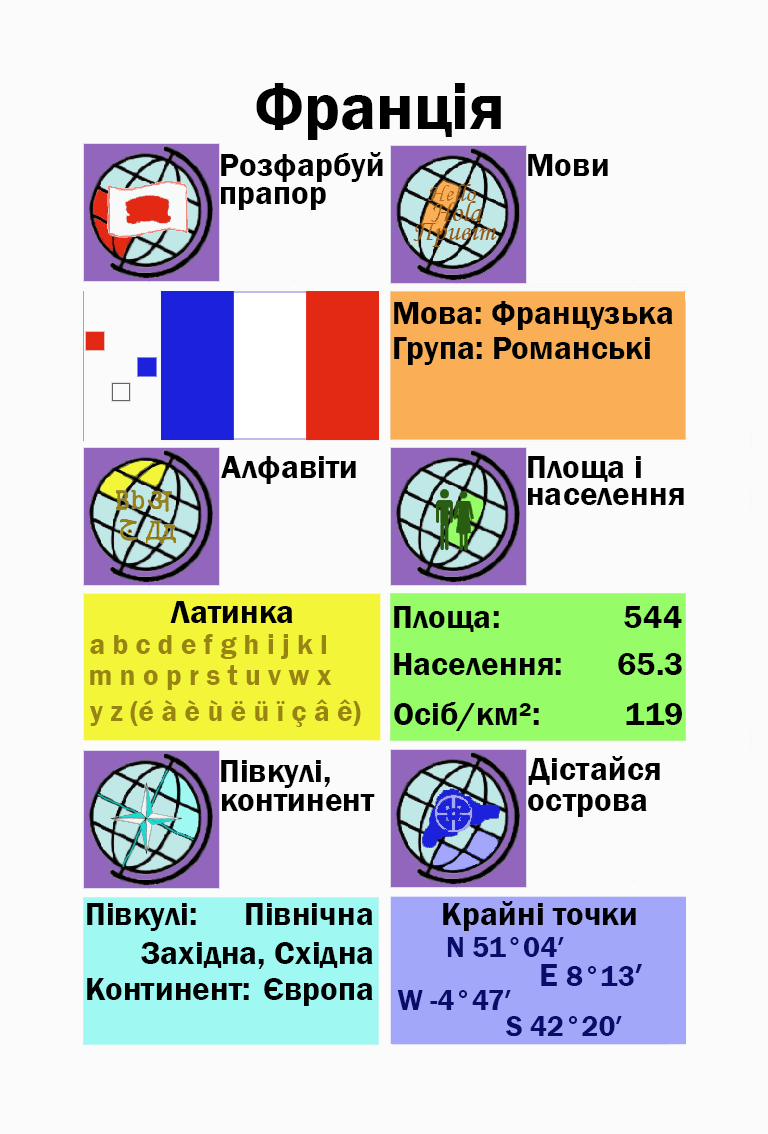
<style>
.page{position:relative;width:768px;height:1134px;background:#fbfbfb}
.page>*{position:absolute;margin:0}
.t1{font:66.7px "FranklinGothic-Demi";color:#000000}
.t2{font:33.3px "FranklinGothic-Demi";color:#000000}
.t3{font:33.3px "FranklinGothic-Demi";color:#000003}
.t4{font:29.2px "FranklinGothic-Demi";color:#988413}
.t5{font:29.2px "FranklinGothic-Demi";color:#090c69}
.t6{font:33.3px "FranklinGothic-Demi";color:#090c69}
</style>
<div class="page">
<p class="t1" style="left:256px;top:83px;width:245px;height:57px">Франція</p>
<p class="t2" style="left:221px;top:152px;width:162px;height:30px">Розфарбуй</p>
<p class="t2" style="left:528px;top:154px;width:80px;height:22px">Мови</p>
<p class="t2" style="left:221px;top:187px;width:105px;height:23px">прапор</p>
<p class="t2" style="left:394px;top:301px;width:279px;height:29px">Мова: Французька</p>
<p class="t2" style="left:394px;top:337px;width:256px;height:28px">Група: Романські</p>
<p class="t2" style="left:221px;top:456px;width:135px;height:28px">Алфавіти</p>
<p class="t2" style="left:528px;top:456px;width:113px;height:26px">Площа і</p>
<p class="t2" style="left:528px;top:488px;width:156px;height:17px">населення</p>
<p class="t2" style="left:170px;top:601px;width:123px;height:22px">Латинка</p>
<p class="t2" style="left:394px;top:606px;width:105px;height:26px">Площа:</p>
<p class="t3" style="left:624px;top:606px;width:58px;height:22px">544</p>
<p class="t4" style="left:90px;top:634px;width:236px;height:25px">a b c d e f g h i j k l</p>
<p class="t2" style="left:394px;top:653px;width:167px;height:22px">Населення:</p>
<p class="t2" style="left:618px;top:653px;width:64px;height:22px">65.3</p>
<p class="t4" style="left:90px;top:665px;width:242px;height:25px">m n o p r s t u v w x</p>
<p class="t4" style="left:89px;top:699px;width:272px;height:28px">y z (é à è ù ë ü ï ç â ê)</p>
<p class="t2" style="left:394px;top:702px;width:145px;height:29px">Осіб/км²:</p>
<p class="t2" style="left:626px;top:703px;width:56px;height:22px">119</p>
<p class="t2" style="left:221px;top:760px;width:109px;height:28px">Півкулі,</p>
<p class="t2" style="left:528px;top:756px;width:132px;height:29px">Дістайся</p>
<p class="t2" style="left:222px;top:794px;width:153px;height:17px">континент</p>
<p class="t2" style="left:528px;top:794px;width:119px;height:23px">острова</p>
<p class="t2" style="left:87px;top:903px;width:109px;height:28px">Півкулі:</p>
<p class="t2" style="left:246px;top:903px;width:127px;height:22px">Північна</p>
<p class="t3" style="left:443px;top:901px;width:193px;height:30px">Крайні точки</p>
<p class="t2" style="left:141px;top:942px;width:232px;height:27px">Західна, Східна</p>
<p class="t5" style="left:447px;top:937px;width:117px;height:20px">N 51°04′</p>
<p class="t5" style="left:541px;top:964px;width:101px;height:22px"><span class="t6">E </span>8°13<span class="t6">′</span></p>
<p class="t2" style="left:87px;top:978px;width:162px;height:22px">Континент:</p>
<p class="t2" style="left:264px;top:978px;width:109px;height:28px">Європа</p>
<p class="t5" style="left:397px;top:990px;width:114px;height:20px">W -4°47′</p>
<p class="t5" style="left:506px;top:1016px;width:116px;height:21px">S 42°20′</p>
</div>
